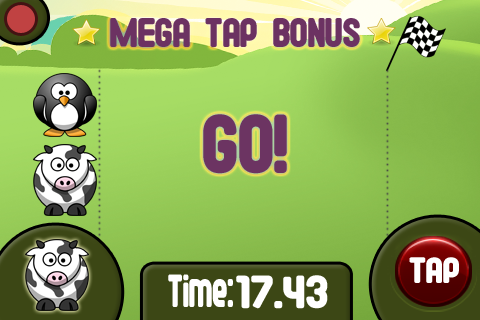
<style>
.page{position:relative;width:480px;height:320px}
.page>*{position:absolute;margin:0}
.t1{font:36.9px "FontopoFONTOPO";color:#6c3462}
.t2{font:75px "FontopoFONTOPO";color:#6c3462}
.t3{font:32.6px "FontopoFONTOPO";color:#ffffff;scale:1.08 1}
.t4{font:41.7px "FontopoFONTOPO";color:#ffffff;scale:0.75 1}
.t5{font:41.7px "FontopoFONTOPO";color:#ffffff;scale:1.14 1}
</style>
<div class="page">
<p class="t1" style="left:110px;top:18px;width:250px;height:29px">MEGA TAP BONUS</p>
<p class="t2" style="left:203px;top:114px;width:84px;height:60px">GO!</p>
<p class="t3" style="left:409px;top:257px;width:50px;height:26px">TAP</p>
<p class="t4" style="left:168px;top:274px;width:65px;height:33px">Time:</p>
<p class="t5" style="left:236px;top:275px;width:92px;height:34px">17.43</p>
</div>
